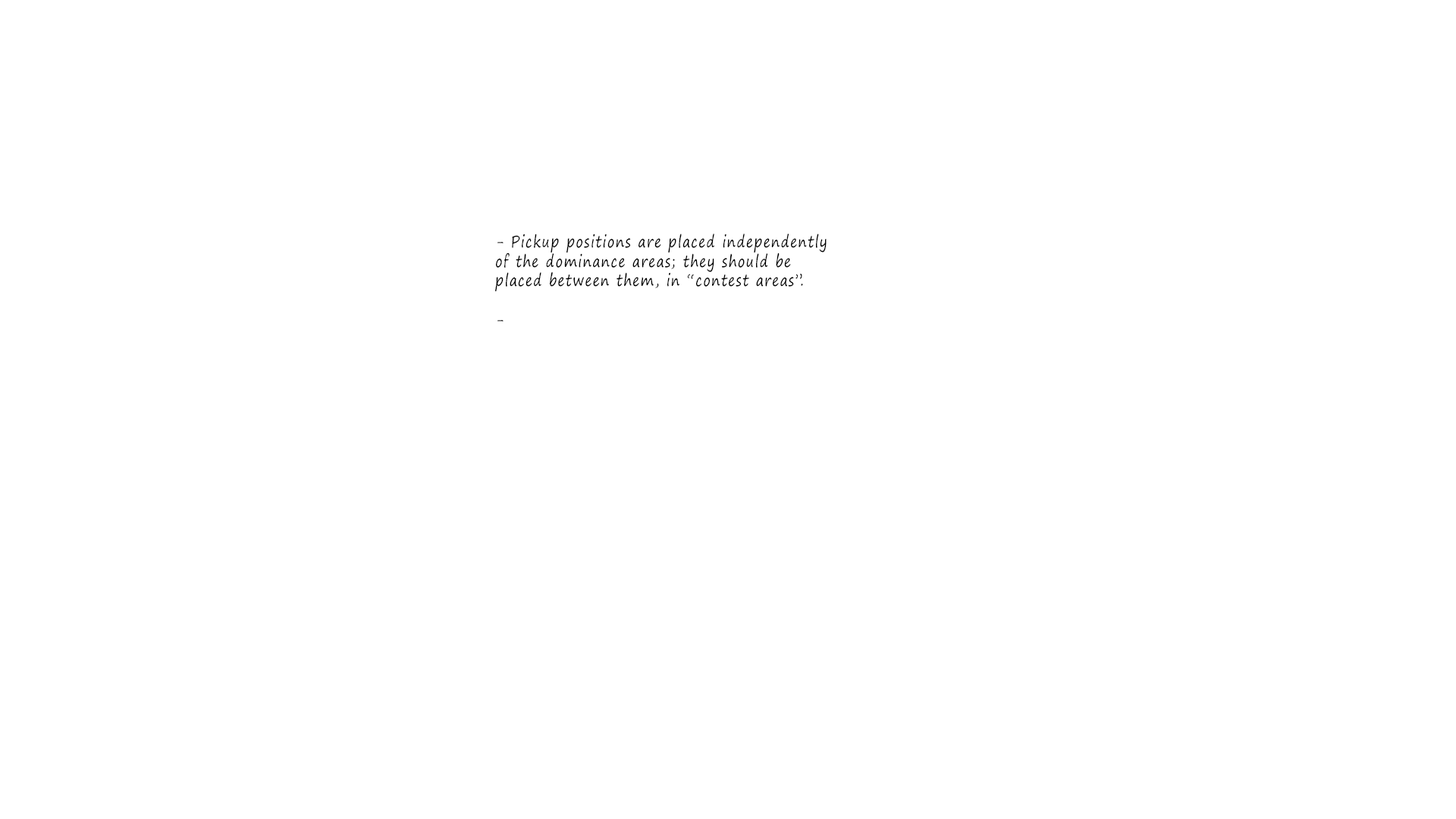
<style>
.page{position:relative;width:1456px;height:819px;background:#ffffff}
.page>*{position:absolute;margin:0}
.t1{font:16.2px "SegoePrint";letter-spacing:0.08em;color:#000000;scale:0.8 1}
</style>
<div class="page">
<p class="t1" style="left:495px;top:234px;width:332px;height:88px">- Pickup positions are placed independently of the dominance areas; they should be placed between them, in “contest areas”.<br><br>-</p>
</div>
